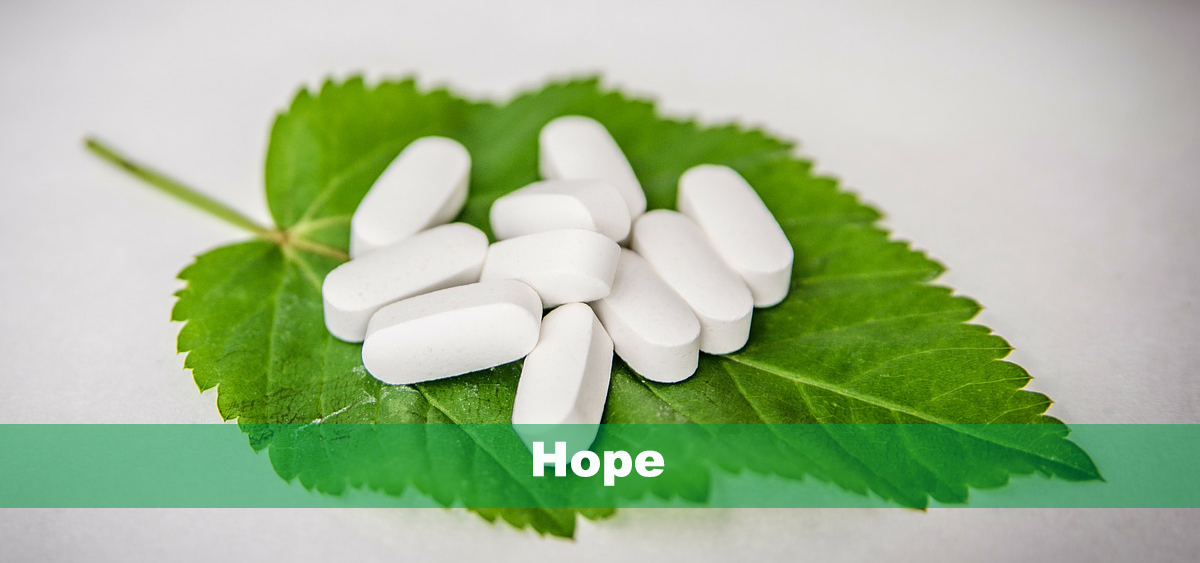
<style>
.page{position:relative;width:1200px;height:563px}
.page>*{position:absolute;margin:0}
.t1{font:48px "Arial-Black";color:#f9fdfc}
</style>
<div class="page">
<p class="t1" style="left:533px;top:441px;width:132px;height:45px">Hope</p>
</div>
